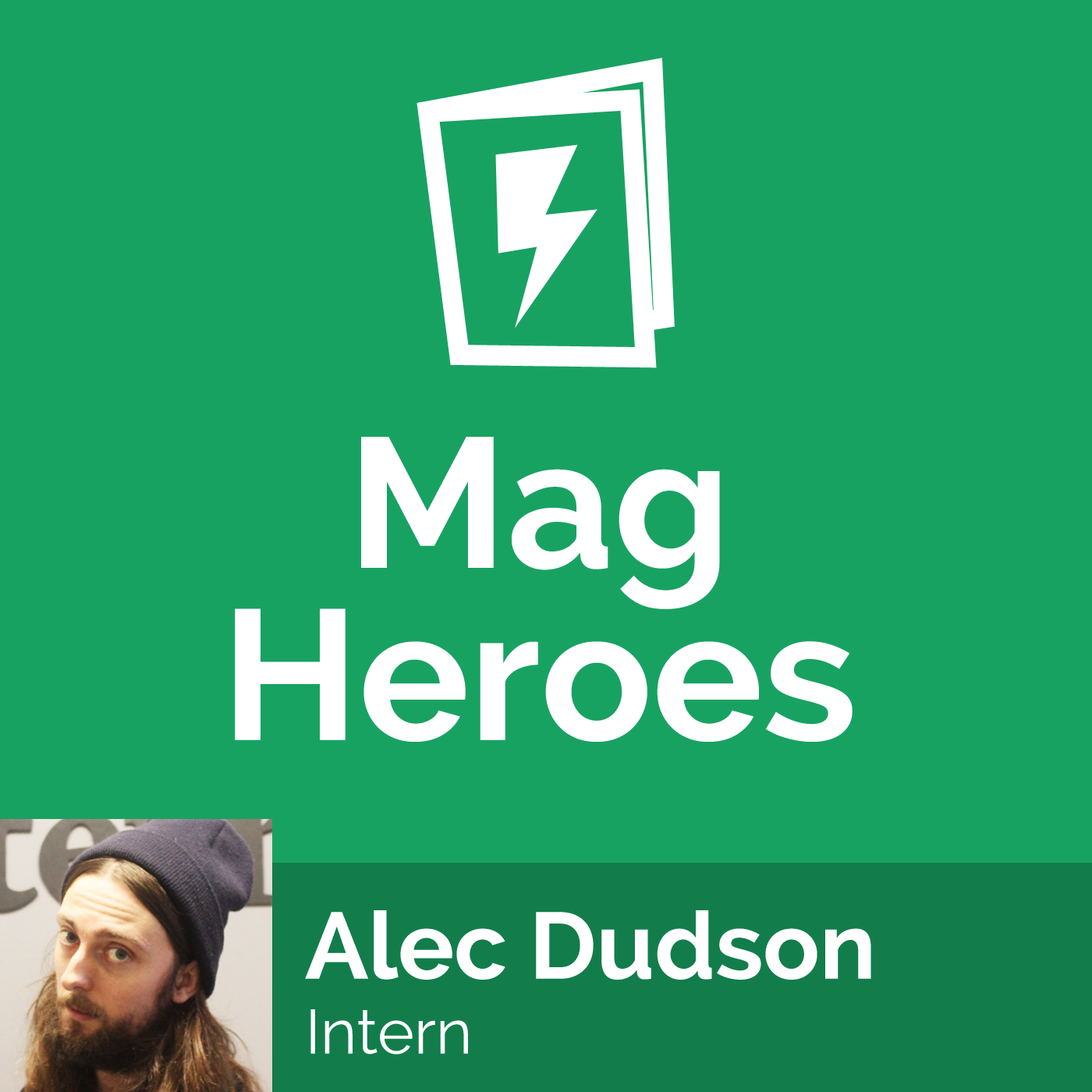
<style>
.page{position:relative;width:1092px;height:1092px;background:#18a262}
.page>*{position:absolute;margin:0}
.t1{font:184.4px "Raleway-Bold";color:#ffffff}
.t2{font:93.6px/93.6px "Raleway-Bold";color:#ffffff}
.t3{font:62.4px "Raleway";color:#ffffff}
</style>
<div class="page">
<p class="t1" style="left:235px;top:437px;width:618px;height:305px">Mag   Heroes</p>
<p class="t2" style="left:305px;top:910px;width:566px;height:145px">Alec Dudson<br><span class="t3">Intern</span></p>
</div>
